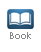
<style>
.page{position:relative;width:41px;height:52px;background:#ffffff}
.page>*{position:absolute;margin:0}
.t1{font:9px "MyriadPro-Regular";letter-spacing:0.05em;color:#878787}
</style>
<div class="page">
<p class="t1" style="left:10px;top:32px;width:21px;height:7px">Book</p>
</div>
